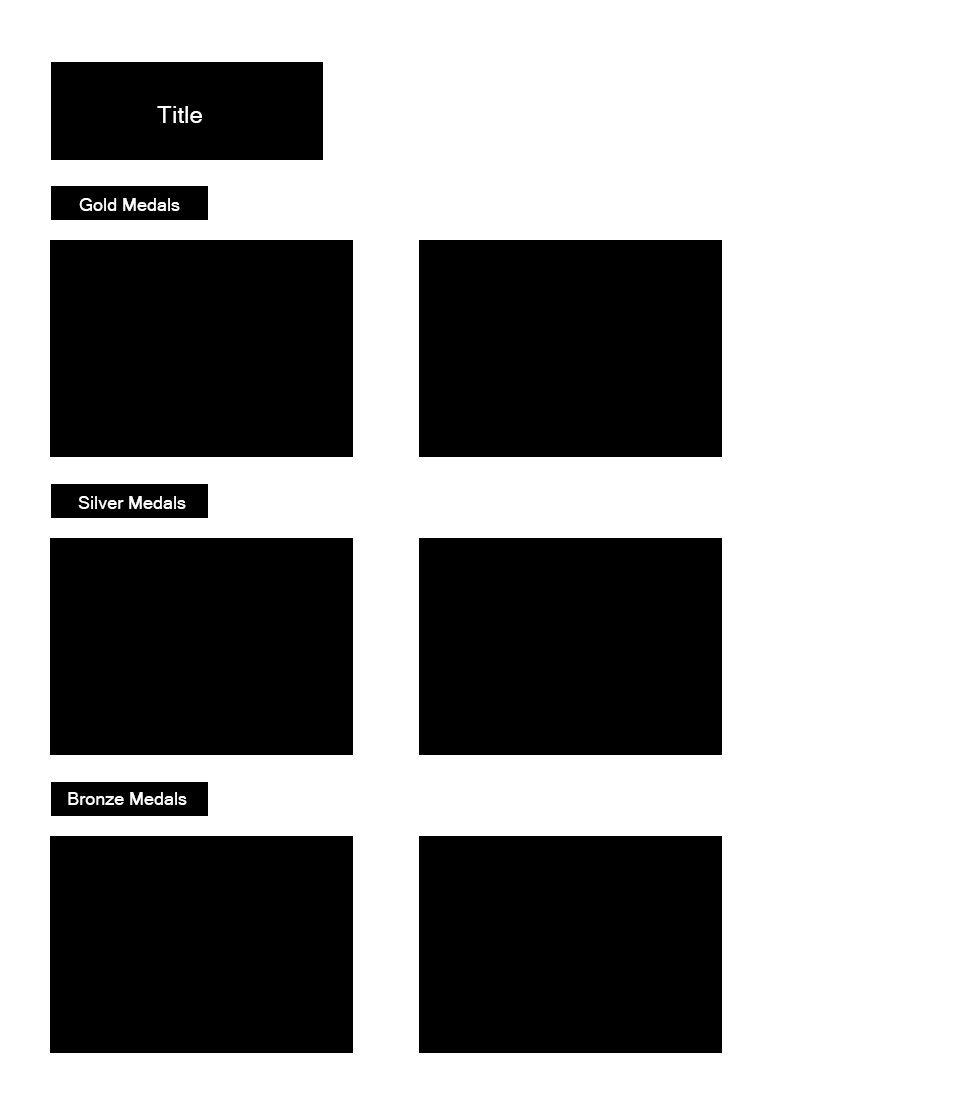
<style>
.page{position:relative;width:960px;height:1093px;background:#ffffff}
.page>*{position:absolute;margin:0}
.t1{font:24px "MicrosoftSansSerif";color:#ffffff}
.t2{font:18px "MicrosoftSansSerif";color:#ffffff}
</style>
<div class="page">
<p class="t1" style="left:157px;top:106px;width:45px;height:17px">Title</p>
<p class="t2" style="left:79px;top:198px;width:101px;height:13px">Gold Medals</p>
<p class="t2" style="left:78px;top:496px;width:108px;height:13px">Silver Medals</p>
<p class="t2" style="left:68px;top:792px;width:119px;height:13px">Bronze Medals</p>
</div>
